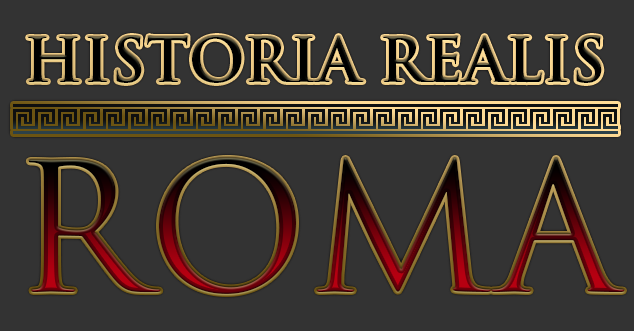
<style>
.page{position:relative;width:634px;height:331px;background:#333333}
.page>*{position:absolute;margin:0}
.t1{font:60px "TrajanPro-Bold";letter-spacing:0.01em}
.t2{font:174px "TrajanPro-Regular";letter-spacing:0.01em}
</style>
<div class="page">
<p class="t1" style="left:28px;top:36px;width:596px;height:258px;text-align:center">HISTORIA REALIS<br><span class="t2">ROMA</span></p>
</div>
